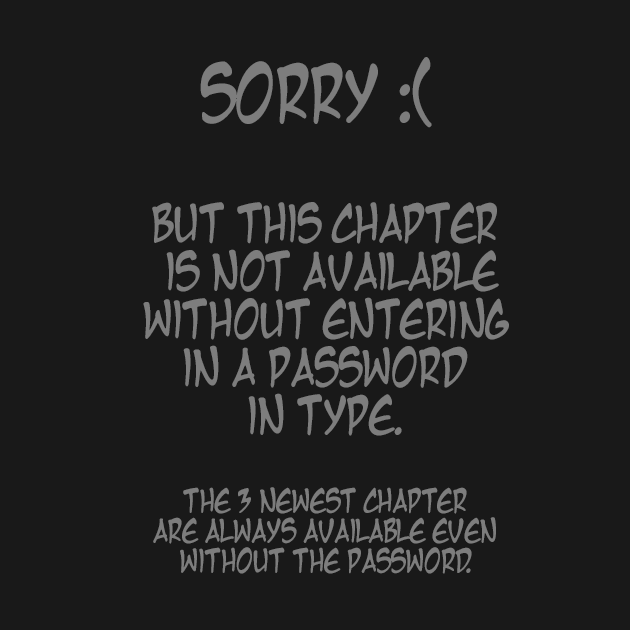
<style>
.page{position:relative;width:630px;height:630px;background:#191919}
.page>*{position:absolute;margin:0}
.t1{font:48px/48px "MangaTemple";letter-spacing:-0.055em;color:#7d7d7d;scale:0.8 1}
.t2{font:72px/72px "MangaTemple";letter-spacing:-0.055em;color:#7d7d7d;scale:0.8 1}
.t3{font:30px/30px "MangaTemple";letter-spacing:-0.055em;color:#7d7d7d;scale:0.8 1}
</style>
<div class="page">
<p class="t1" style="left:143px;top:57px;width:366px;height:517px;text-align:center"><span class="t2">Sorry :( <br><br></span>but this chapter<br> is not available<br>without entering<br>in a password<br>in type.<br><br><span class="t3">the 3 newest chapter<br>are always available even<br>without the password.</span></p>
</div>
